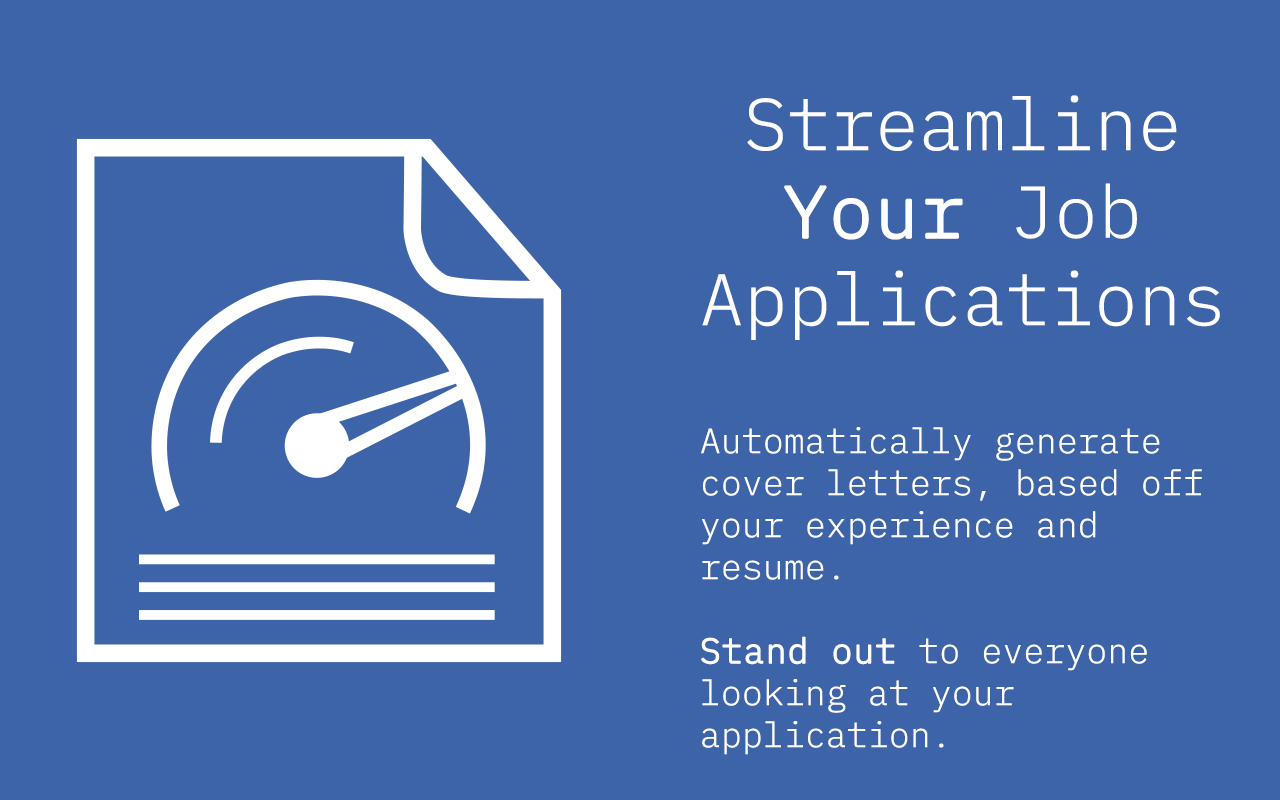
<style>
.page{position:relative;width:1280px;height:800px;background:#3d64a9}
.page>*{position:absolute;margin:0}
.t1{font:73px "IBMPlexMono-Light";color:#ffffff}
.t2{font:73px "IBMPlexMono-Light";color:#ffffff;font-weight:bold}
.t3{font:35px "IBMPlexMono-Light";color:#ffffff}
.t4{font:35px "IBMPlexMono-Light";color:#ffffff;font-weight:bold}
</style>
<div class="page">
<p class="t1" style="left:702px;top:95px;width:518px;height:245px;text-align:center">Streamline <span class="t2">Your</span> Job Applications</p>
<p class="t3" style="left:701px;top:427px;width:501px;height:328px">Automatically generate<br>cover letters, based off your experience and resume.<br><br><span class="t4">Stand out</span> to everyone looking at your application.</p>
</div>
